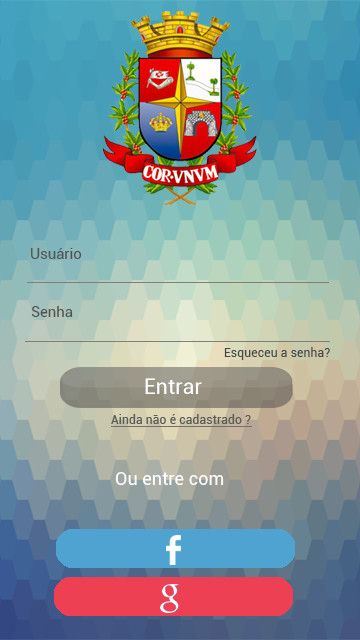
<style>
.page{position:relative;width:360px;height:640px}
.page>*{position:absolute;margin:0}
.t1{font:14.8px "Roboto-Regular";color:#545250}
.t2{font:14.8px "Roboto-Regular";color:#53514f}
.t3{font:12.3px "Roboto-Regular";color:#484848}
.t4{font:22.2px "Roboto-Regular";color:#ffffff;scale:0.97 1}
.t5{font:17.8px "Roboto-Regular";color:#ffffff}
</style>
<div class="page">
<p class="t1" style="left:31px;top:248px;width:51px;height:11px">Usuário</p>
<p class="t2" style="left:31px;top:306px;width:42px;height:11px">Senha</p>
<p class="t3" style="left:224px;top:347px;width:106px;height:13px">Esqueceu a senha?</p>
<p class="t4" style="left:145px;top:378px;width:57px;height:16px">Entrar</p>
<p class="t5" style="left:115px;top:472px;width:109px;height:13px">Ou entre com</p>
</div>
